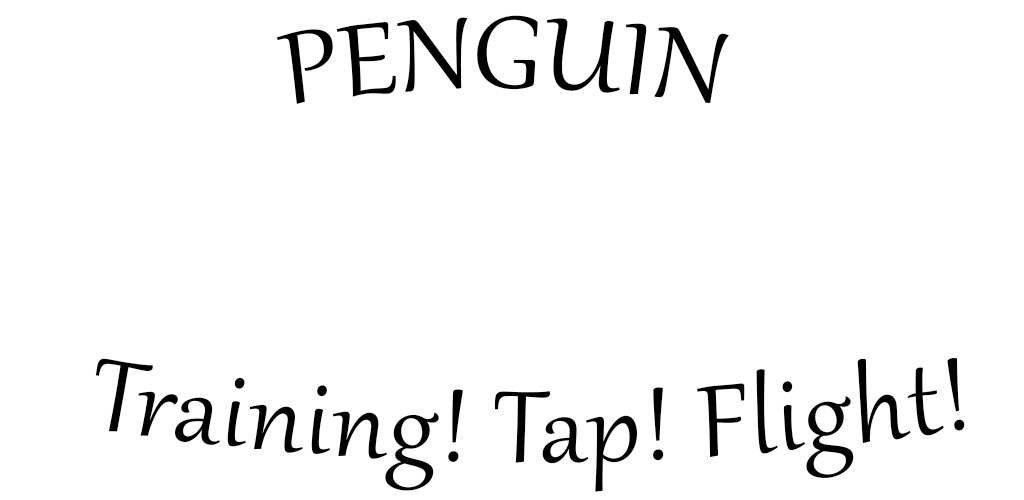
<style>
.page{position:relative;width:1024px;height:500px;background:#ffffff}
.page>*{position:absolute;margin:0}
.t1{font:125px "Gabriola";letter-spacing:0.015em;color:#000000}
</style>
<div class="page">
<p class="t1" style="left:276px;top:15px;width:453px;height:89px">PENGUIN</p>
<p class="t1" style="left:95px;top:358px;width:870px;height:134px">Training! Tap! Flight!</p>
</div>
